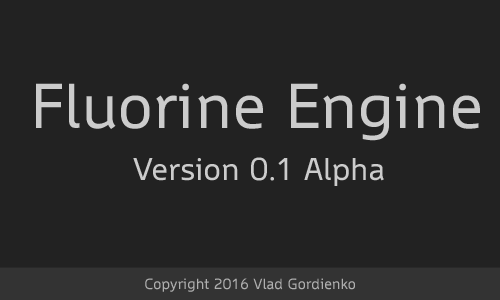
<style>
.page{position:relative;width:500px;height:300px;background:#222222}
.page>*{position:absolute;margin:0}
.t1{font:60px "WascoSans";color:#cccccc}
.t2{font:30px "WascoSans";color:#cccccc}
.t3{font:14px "WascoSans";color:#afafaf}
</style>
<div class="page">
<p class="t1" style="left:36px;top:83px;width:444px;height:58px">Fluorine Engine</p>
<p class="t2" style="left:133px;top:157px;width:251px;height:29px">Version 0.1 Alpha</p>
<p class="t3" style="left:145px;top:278px;width:210px;height:14px">Copyright 2016 Vlad Gordienko</p>
</div>
